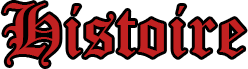
<style>
.page{position:relative;width:248px;height:69px;background:#ffffff}
.page>*{position:absolute;margin:0}
.t1{font:72px "OldEnglishTextMT";color:#c22121}
</style>
<div class="page">
<p class="t1" style="left:3px;top:3px;width:242px;height:63px">Histoire</p>
</div>
